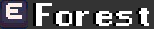
<style>
.page{position:relative;width:154px;height:29px;background:#333333}
.page>*{position:absolute;margin:0}
.t1{font:30px "ManaspaceReg";color:#ffffff}
</style>
<div class="page">
<p class="t1" style="left:36px;top:3px;width:113px;height:23px">Forest</p>
</div>
